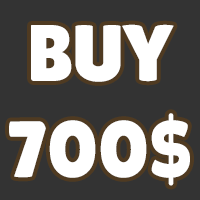
<style>
.page{position:relative;width:200px;height:200px;background:#333333}
.page>*{position:absolute;margin:0}
.t1{font:80px "LilitaOne";color:#ffffff}
</style>
<div class="page">
<p class="t1" style="left:9px;top:24px;width:181px;height:162px;text-align:center">BUY<br>700$</p>
</div>
